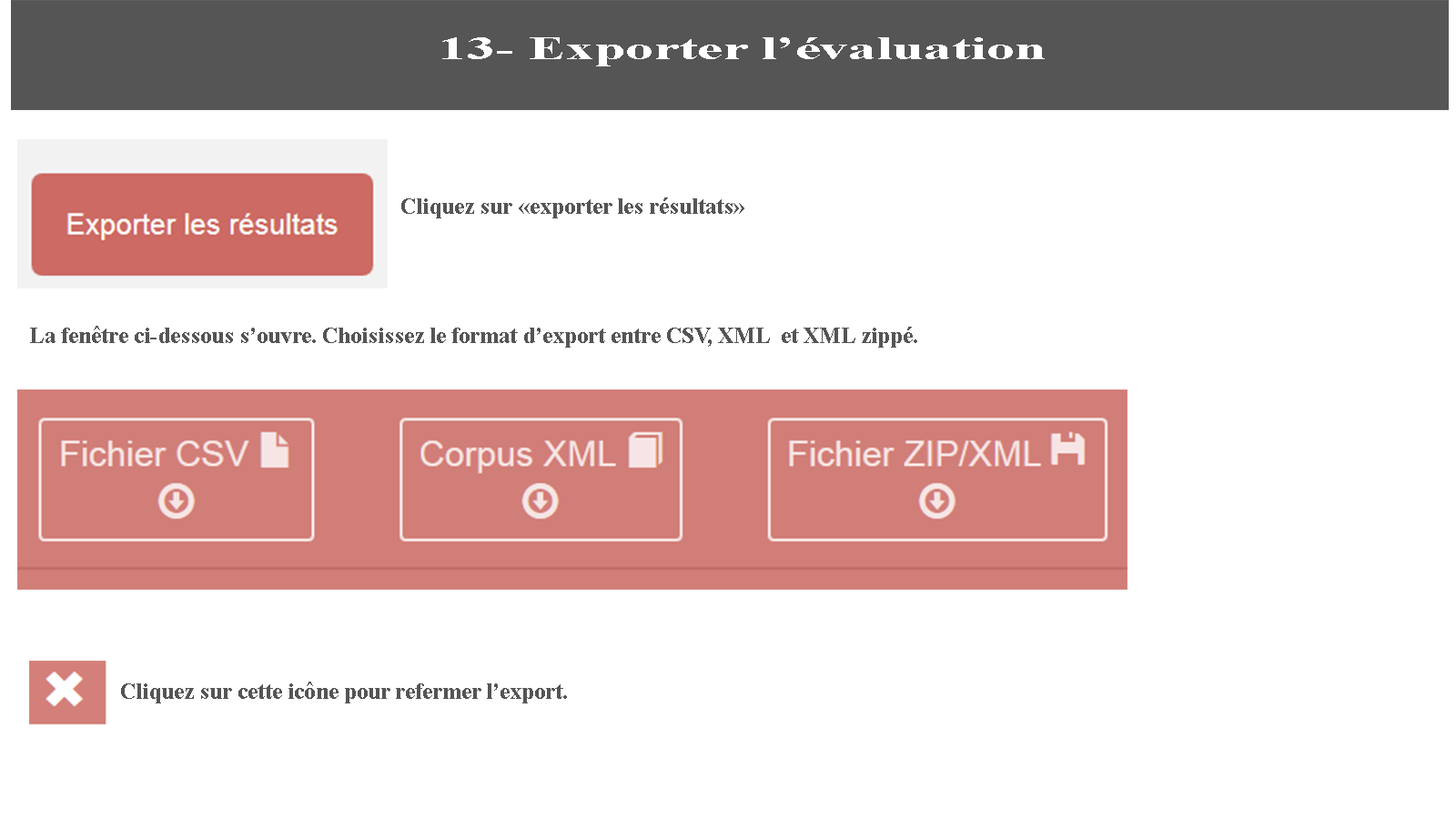
<style>
.page{position:relative;width:1456px;height:819px;background:#ffffff}
.page>*{position:absolute;margin:0}
.t1{font:33.2px "TimesNewRomanPS-BoldMT";color:#ffffff;scale:1.7 1}
.t2{font:22.7px "TimesNewRomanPS-BoldMT";color:#555555}
.t3{font:10.9px "TimesNewRomanPS-BoldMT";color:#555555}
</style>
<div class="page">
<p class="t1" style="left:442px;top:37px;width:603px;height:29px">13- Exporter l’évaluation</p>
<p class="t2" style="left:401px;top:197px;width:343px;height:21px">Cliquez sur «exporter les résultats»</p>
<p class="t3" style="left:30px;top:326px;width:887px;height:22px">La fenêtre ci-dessous s’ouvre. Choisissez le format d’export entre CSV, XML  et XML zippé.</p>
<p class="t3" style="left:121px;top:682px;width:446px;height:21px">Cliquez sur cette icône pour refermer l’export.</p>
</div>
